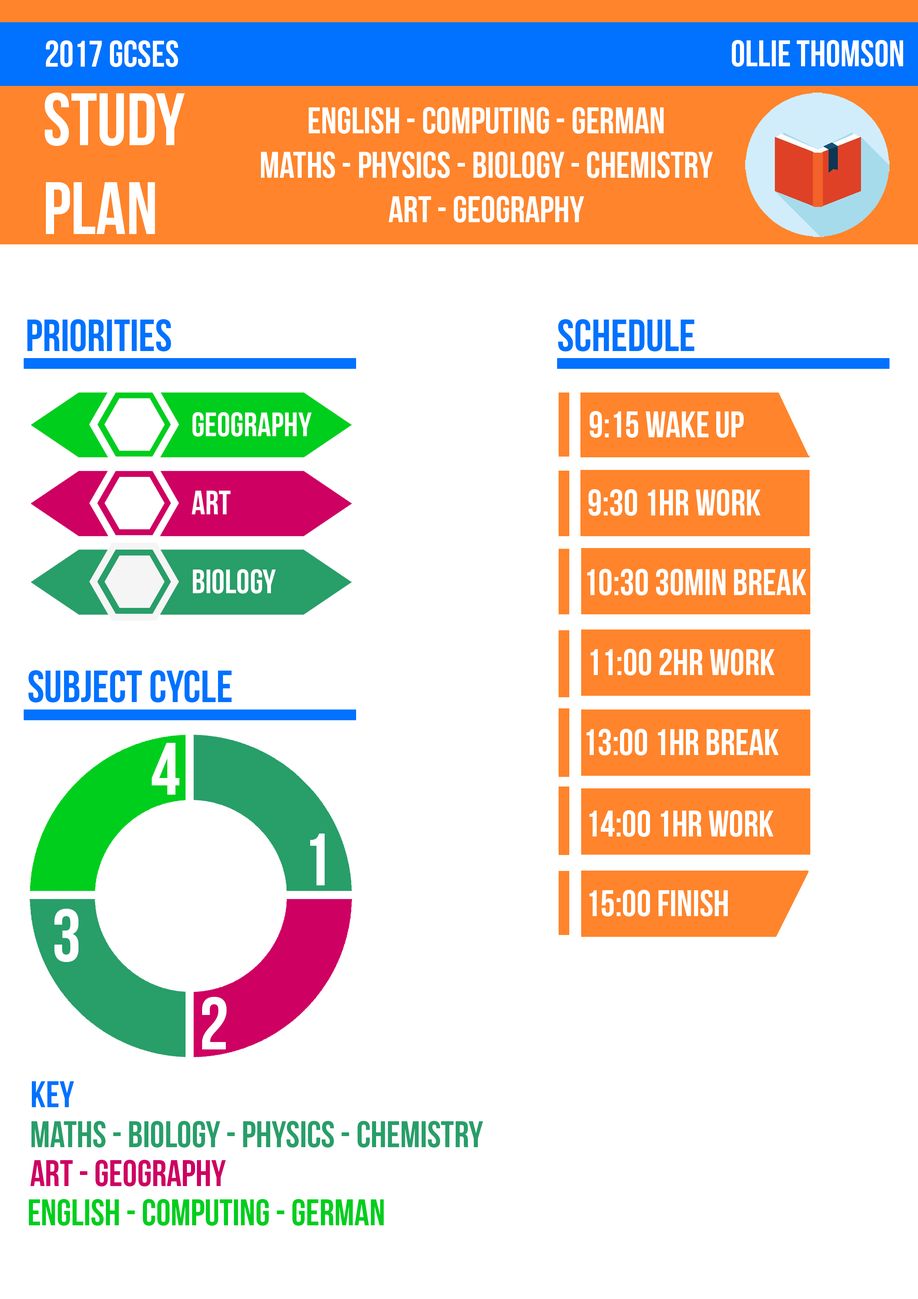
<style>
.page{position:relative;width:918px;height:1299px;background:#ffffff}
.page>*{position:absolute;margin:0}
.t1{font:37px "BebasNeue";color:#ffffff}
.t2{font:74px "BebasNeue";color:#ffffff}
.t3{font:45.2px "BebasNeue";color:#0072ff}
.t4{font:33.9px "BebasNeue";color:#ffffff}
.t5{font:37px "BebasNeue";color:#0072ff}
.t6{font:37px "BebasNeue";color:#289e69}
.t7{font:37px "BebasNeue";color:#ce0062}
.t8{font:37px "BebasNeue";color:#00ce1d}
</style>
<div class="page">
<p class="t1" style="left:46px;top:40px;width:132px;height:27px">2017 GCSEs</p>
<p class="t1" style="left:732px;top:40px;width:171px;height:27px">Ollie Thomson</p>
<p class="t2" style="left:45px;top:93px;width:140px;height:141px">STUDY<br>PLAN</p>
<p class="t1" style="left:261px;top:107px;width:452px;height:116px;text-align:center">ENGLISH - COMPUTING - GERMAN<br>MATHS - PHYSICS - BIOLOGY - CHEMISTRY<br>ART - GEOGRAPHY</p>
<p class="t3" style="left:27px;top:319px;width:144px;height:32px">Priorities</p>
<p class="t3" style="left:558px;top:319px;width:137px;height:32px">Schedule</p>
<p class="t4" style="left:193px;top:412px;width:119px;height:24px">geography</p>
<p class="t1" style="left:590px;top:411px;width:154px;height:27px">9:15 Wake up</p>
<p class="t4" style="left:192px;top:491px;width:39px;height:23px">Art</p>
<p class="t1" style="left:589px;top:489px;width:172px;height:27px">9:30 1HR WORK</p>
<p class="t4" style="left:193px;top:569px;width:83px;height:24px">Biology</p>
<p class="t1" style="left:587px;top:569px;width:220px;height:26px">10:30 30min break</p>
<p class="t1" style="left:591px;top:649px;width:184px;height:26px">11:00 2HR Work</p>
<p class="t3" style="left:29px;top:670px;width:203px;height:32px">Subject cycle</p>
<p class="t1" style="left:586px;top:729px;width:193px;height:26px">13:00 1Hr Break</p>
<p class="t2" style="left:152px;top:743px;width:28px;height:51px">4</p>
<p class="t1" style="left:589px;top:810px;width:185px;height:27px">14:00 1HR Work</p>
<p class="t2" style="left:310px;top:833px;width:15px;height:52px">1</p>
<p class="t1" style="left:589px;top:890px;width:139px;height:26px">15:00 FINISH</p>
<p class="t2" style="left:54px;top:909px;width:24px;height:53px">3</p>
<p class="t2" style="left:202px;top:997px;width:25px;height:52px">2</p>
<p class="t5" style="left:32px;top:1081px;width:42px;height:26px">KEY</p>
<p class="t6" style="left:31px;top:1121px;width:452px;height:26px">MATHS - BIOLOGY - PHYSICS - CHEMISTRY</p>
<p class="t7" style="left:30px;top:1160px;width:196px;height:26px">ART - GEOGRAPHY</p>
<p class="t8" style="left:29px;top:1199px;width:355px;height:26px">ENGLISH - COMPUTING - GERMAN</p>
</div>
